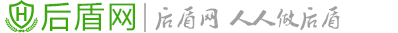
<style>
.page{position:relative;width:398px;height:33px;background:#ffffff}
.page>*{position:absolute;margin:0}
.t1{font:30.6px "MicrosoftYaHei";letter-spacing:0.08em;color:#3caa0d}
.t2{font:21.9px "Ò¶¸ùÓÑÃ«±ÊÐÐÊé¼òÌå";letter-spacing:0.08em;color:#a0a0a0;scale:0.96 1}
</style>
<div class="page">
<p class="t1" style="left:41px;top:2px;width:94px;height:29px">后盾网</p>
<p class="t2" style="left:155px;top:6px;width:185px;height:25px">后盾网 人人做后盾</p>
</div>
